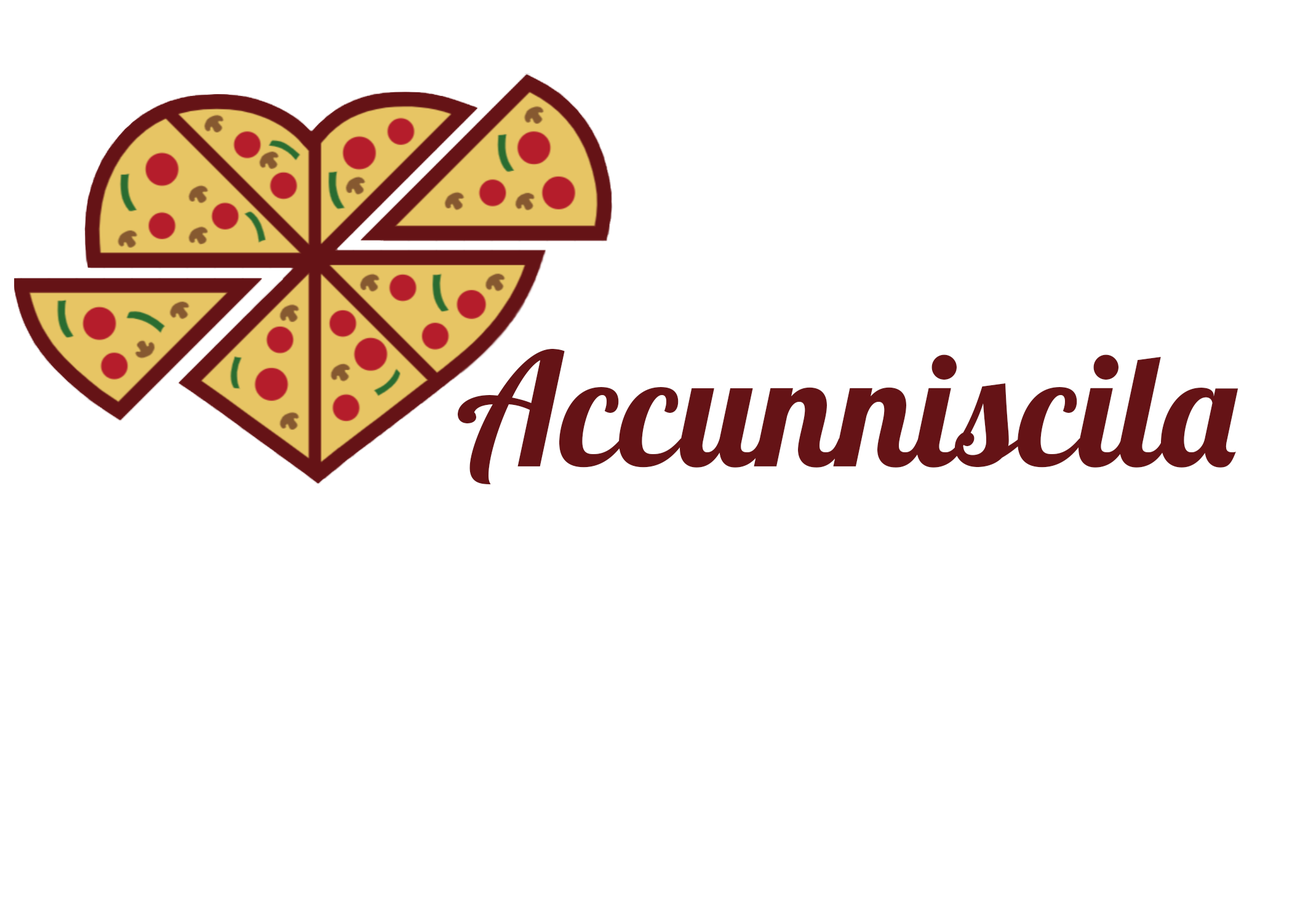
<style>
.page{position:relative;width:1292px;height:923px;background:#ffffff}
.page>*{position:absolute;margin:0}
.t1{font:156.4px "Lobster1.4";color:#651316}
</style>
<div class="page">
<p class="t1" style="left:458px;top:349px;width:781px;height:135px">Accunniscila</p>
</div>
